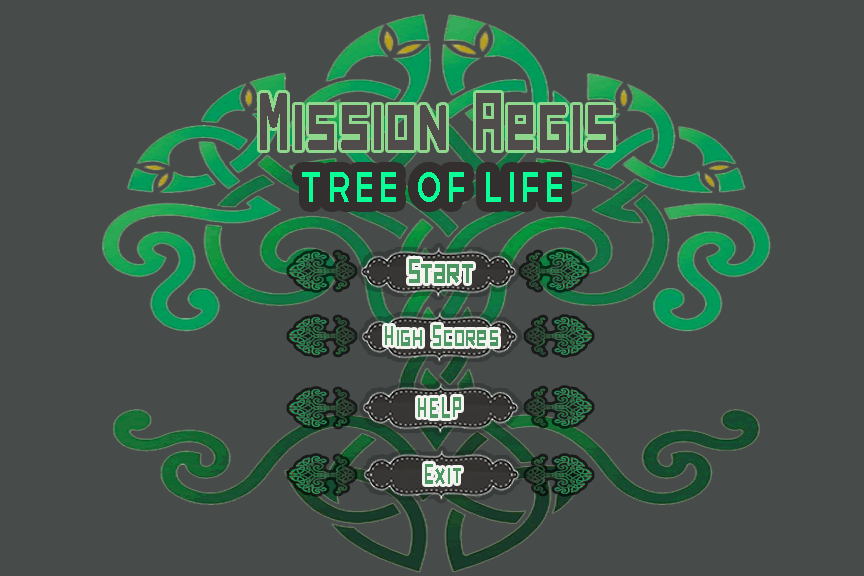
<style>
.page{position:relative;width:864px;height:576px;background:#474b49}
.page>*{position:absolute;margin:0}
.t1{font:81.6px "darkforest";letter-spacing:0.08em;color:#514c4c;scale:0.71 1}
.t2{font:57.1px "Telegrafico";letter-spacing:0.08em;color:#09ff96;scale:0.71 1}
.t3{font:35.4px "darkforest";letter-spacing:0.08em;color:#4c9862;scale:0.71 1}
.t4{font:28.6px "darkforest";letter-spacing:0.08em;color:#4c9862;scale:0.71 1}
</style>
<div class="page">
<p class="t1" style="left:260px;top:93px;width:353px;height:57px">Mission Aegis</p>
<p class="t2" style="left:302px;top:172px;width:260px;height:30px">Tree Of LIFE</p>
<p class="t3" style="left:409px;top:259px;width:64px;height:24px">Start</p>
<p class="t4" style="left:385px;top:325px;width:113px;height:21px">High Scores</p>
<p class="t4" style="left:418px;top:397px;width:43px;height:21px">HELP</p>
<p class="t4" style="left:425px;top:464px;width:36px;height:20px">Exit</p>
</div>
